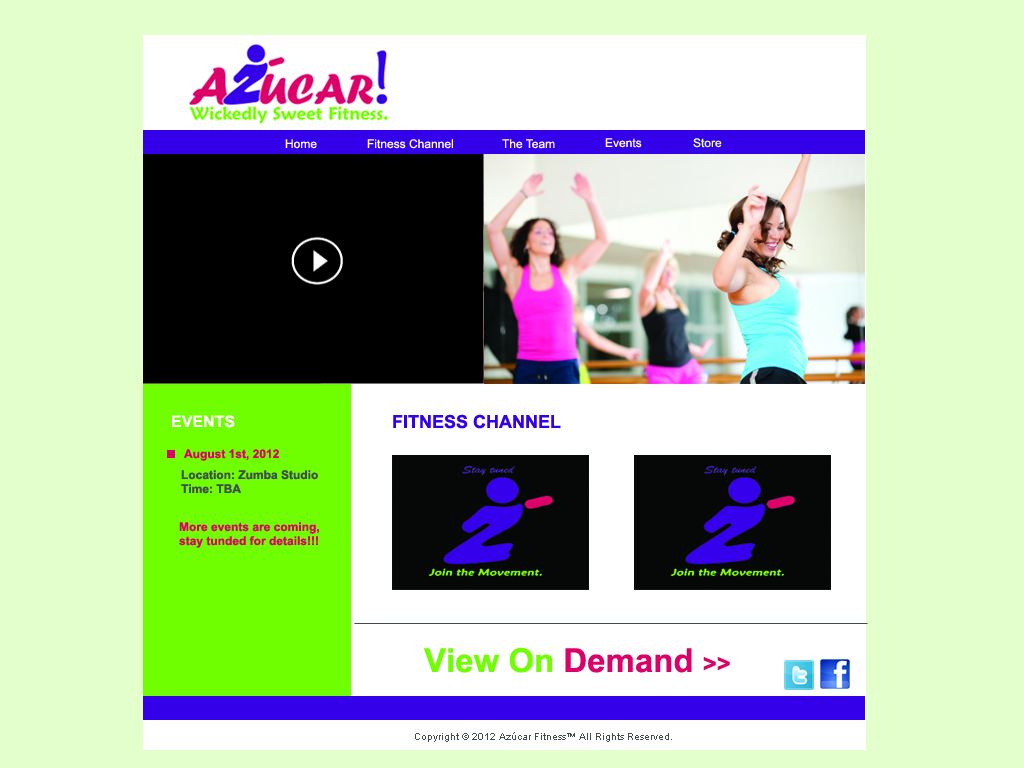
<style>
.page{position:relative;width:1024px;height:768px;background:#e2ffcc}
.page>*{position:absolute;margin:0}
.t1{font:12px "ArialMT";color:#ffffff}
.t2{font:12px "ArialMT";color:#e2ffcc}
.t3{font:18px "Arial-BoldMT";color:#3400e9}
.t4{font:16px "Arial-BoldMT";color:#ffffff}
.t5{font:12px "Arial-BoldMT";color:#dc0068}
.t6{font:12px/14px "Arial-BoldMT";color:#404d4f}
.t7{font:12px/14px "Arial-BoldMT";color:#dc0068}
.t8{font:33px "Arial-BoldMT";color:#70ff00}
.t9{font:33px "Arial-BoldMT";color:#dc0068}
.t10{font:24px "Arial-BoldMT";color:#dc0068}
.t11{font:10px "ArialMT";color:#404e4f}
</style>
<div class="page">
<p class="t1" style="left:285px;top:139px;width:32px;height:10px">Home</p>
<p class="t1" style="left:367px;top:139px;width:86px;height:10px">Fitness Channel</p>
<p class="t1" style="left:502px;top:139px;width:53px;height:10px">The Team</p>
<p class="t1" style="left:605px;top:138px;width:37px;height:10px">Events</p>
<p class="t2" style="left:693px;top:138px;width:29px;height:10px">Store</p>
<p class="t3" style="left:393px;top:414px;width:168px;height:15px">FITNESS CHANNEL</p>
<p class="t4" style="left:172px;top:415px;width:63px;height:13px">EVENTS</p>
<p class="t5" style="left:184px;top:449px;width:95px;height:12px">August 1st, 2012</p>
<p class="t6" style="left:181px;top:470px;width:137px;height:24px">Location: Zumba Studio<br>Time: TBA</p>
<p class="t7" style="left:179px;top:522px;width:140px;height:26px">More events are coming,<br>stay tunded for details!!!</p>
<p class="t8" style="left:423px;top:647px;width:307px;height:26px">View On<span class="t9"> Demand </span><span class="t10">&gt;&gt;</span></p>
<p class="t11" style="left:415px;top:732px;width:257px;height:10px">Copyright © 2012 Azúcar Fitness™ All Rights Reserved.</p>
</div>
